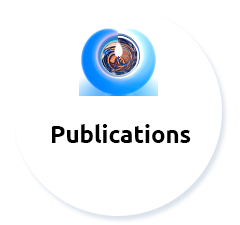
<style>
.page{position:relative;width:240px;height:225px;background:#ffffff}
.page>*{position:absolute;margin:0}
.t1{font:24px "Ubuntu-Bold";color:#000000}
</style>
<div class="page">
<p class="t1" style="left:52px;top:124px;width:139px;height:19px">Publications</p>
</div>
